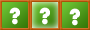
<style>
.page{position:relative;width:90px;height:30px}
.page>*{position:absolute;margin:0}
.t1{font:24px "STHupo";color:#ffffff}
</style>
<div class="page">
<p class="t1" style="left:9px;top:7px;width:11px;height:18px">?</p>
<p class="t1" style="left:39px;top:7px;width:11px;height:18px">?</p>
<p class="t1" style="left:69px;top:8px;width:11px;height:18px">?</p>
</div>
